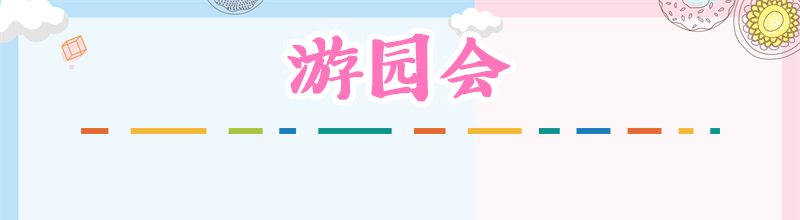
<style>
.page{position:relative;width:800px;height:220px;background:#eff8fd}
.page>*{position:absolute;margin:0}
.t1{font:84.8px "SentyTang";letter-spacing:-0.02em;color:#ff75bc;text-transform:uppercase;font-weight:bold}
</style>
<div class="page">
<p class="t1" style="left:287px;top:33px;width:224px;height:69px">游园会</p>
</div>
